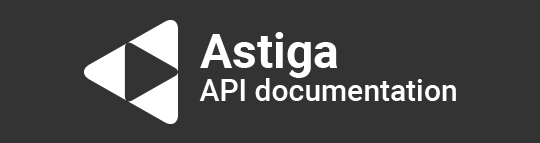
<style>
.page{position:relative;width:540px;height:143px;background:#333333}
.page>*{position:absolute;margin:0}
.t1{font:48px "Roboto-Bold";color:#ffffff}
.t2{font:30px "Roboto-Medium";color:#ffffff}
</style>
<div class="page">
<p class="t1" style="left:200px;top:32px;width:138px;height:46px">Astiga</p>
<p class="t2" style="left:199px;top:78px;width:257px;height:23px">API documentation</p>
</div>
